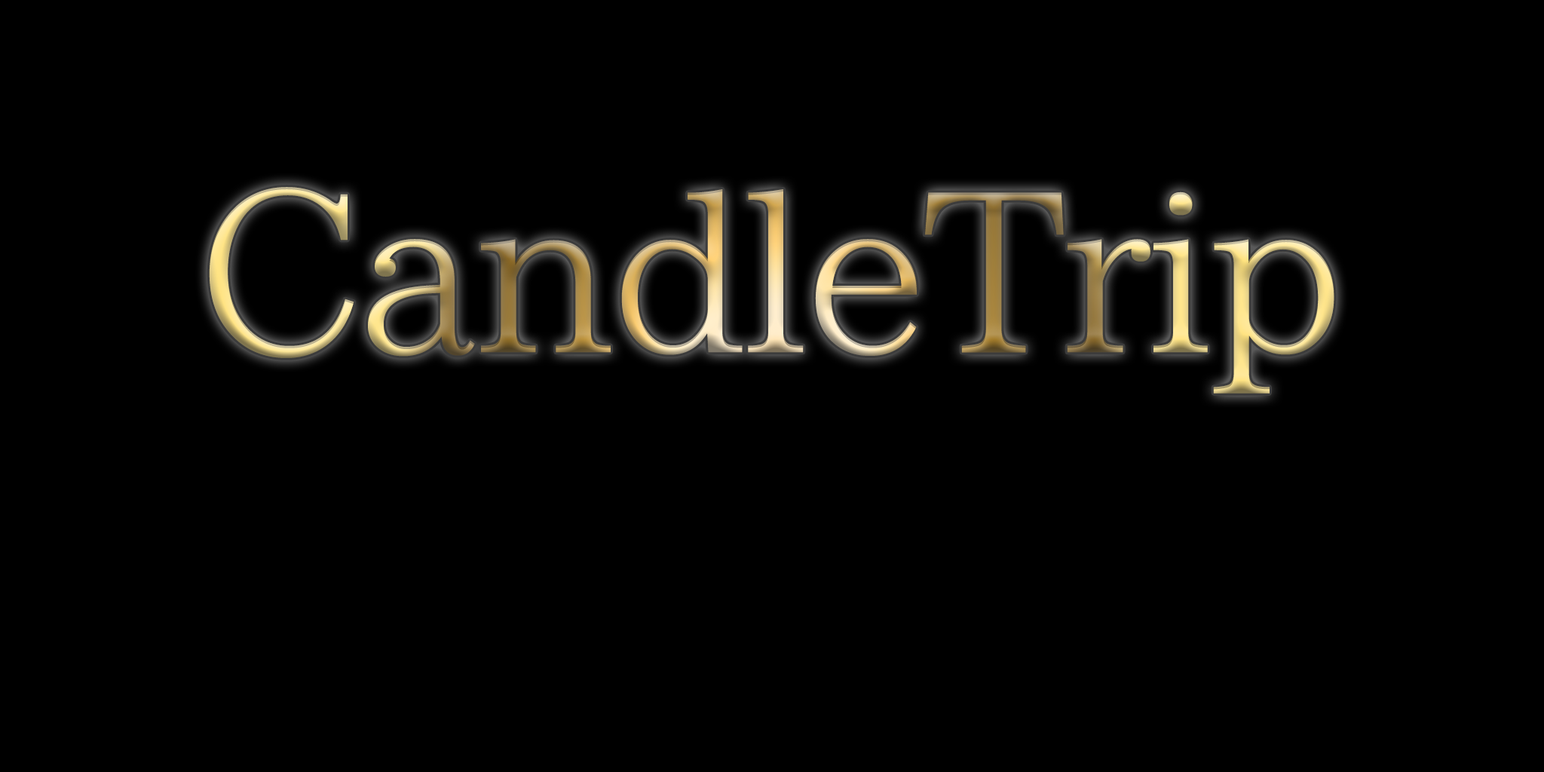
<style>
.page{position:relative;width:1544px;height:772px;background:#000000}
.page>*{position:absolute;margin:0}
.t1{font:226.2px "Koku-Mincho-Regular";letter-spacing:-0.025em}
</style>
<div class="page">
<p class="t1" style="left:209px;top:187px;width:1126px;height:207px">CandleTrip</p>
</div>
